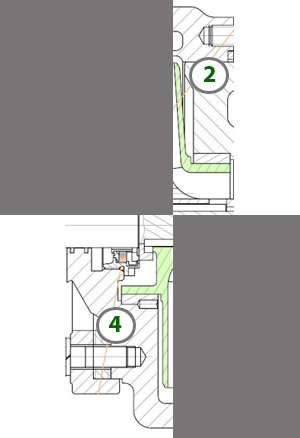
<style>
.page{position:relative;width:300px;height:438px;background:#777575}
.page>*{position:absolute;margin:0}
.t1{font:24px "MyriadPro-Bold";color:#066801}
</style>
<div class="page">
<p class="t1" style="left:204px;top:66px;width:11px;height:16px">2</p>
<p class="t1" style="left:109px;top:316px;width:13px;height:16px">4</p>
</div>
